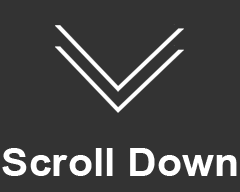
<style>
.page{position:relative;width:240px;height:192px;background:#333333}
.page>*{position:absolute;margin:0}
.t1{font:39px "Arial-BoldMT";color:#ffffff;scale:1.06 1}
</style>
<div class="page">
<p class="t1" style="left:2px;top:148px;width:235px;height:28px">Scroll Down</p>
</div>
